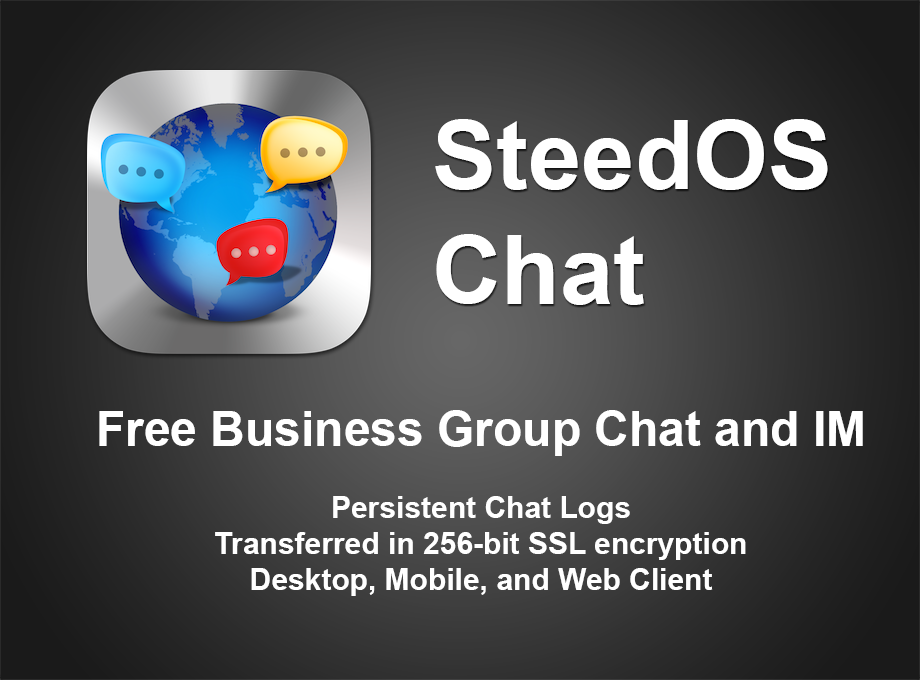
<style>
.page{position:relative;width:920px;height:680px}
.page>*{position:absolute;margin:0}
.t1{font:96px "Arial-BoldMT";color:#ffffff}
.t2{font:30px "Arial-BoldMT";color:#ffffff}
.t3{font:48px "Arial-BoldMT";color:#ffffff}
</style>
<div class="page">
<p class="t1" style="left:435px;top:119px;width:393px;height:186px">SteedOS<br>Chat</p>
<p class="t2" style="left:99px;top:410px;width:764px;height:186px;text-align:center"><span class="t3">Free Business Group Chat and IM<br></span><br>Persistent Chat Logs<br>Transferred in 256-bit SSL encryption<br>Desktop, Mobile, and Web Client</p>
</div>
